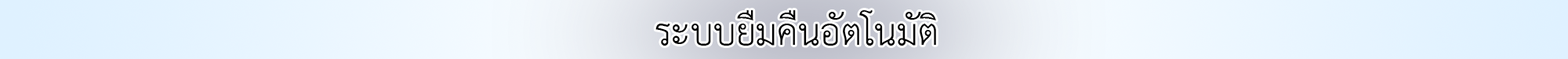
<style>
.page{position:relative;width:1568px;height:59px}
.page>*{position:absolute;margin:0}
.t1{font:53.2px "THSarabunPSK";color:#000000}
</style>
<div class="page">
<p class="t1" style="left:655px;top:10px;width:281px;height:35px">ระบบยืมคืนอัตโนมัติ</p>
</div>
